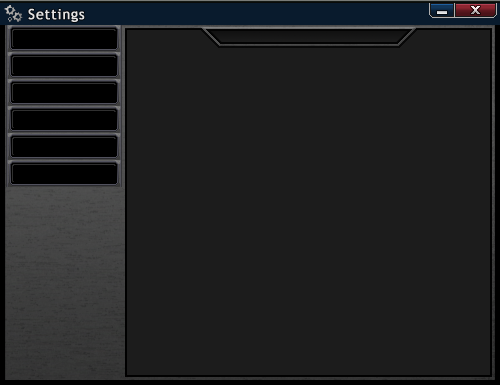
<style>
.page{position:relative;width:500px;height:385px;background:#1c1c1c}
.page>*{position:absolute;margin:0}
.t1{font:14px "TrebuchetMS";letter-spacing:0.04em;color:#e5e5e5;font-weight:bold}
</style>
<div class="page">
<p class="t1" style="left:28px;top:8px;width:57px;height:14px">Settings</p>
</div>
